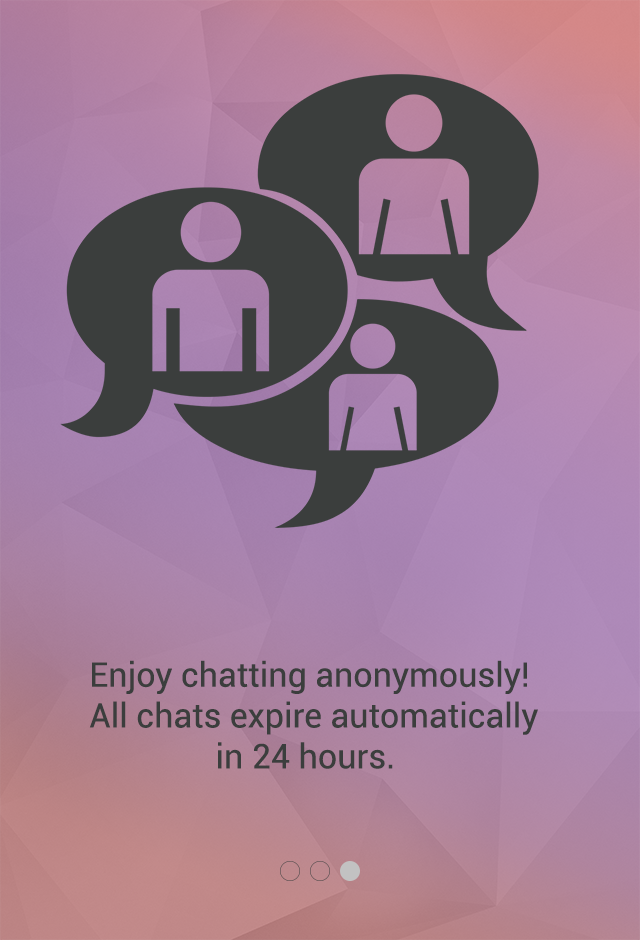
<style>
.page{position:relative;width:640px;height:940px}
.page>*{position:absolute;margin:0}
.t1{font:34px "Roboto-Regular";color:#3b3e3d}
</style>
<div class="page">
<p class="t1" style="left:89px;top:660px;width:449px;height:109px;text-align:center">Enjoy chatting anonymously! <br>All chats expire automatically<br>in 24 hours.</p>
</div>
